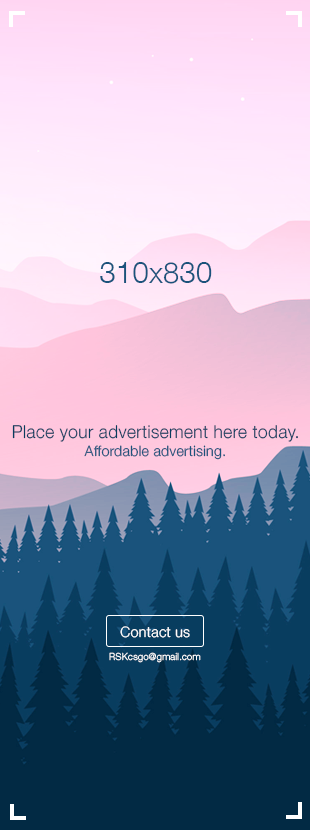
<style>
.page{position:relative;width:310px;height:830px}
.page>*{position:absolute;margin:0}
.t1{font:29px "HelveticaNeue-Light";letter-spacing:0.01em;color:#1a537c}
.t2{font:17.7px "HelveticaNeue-Light";letter-spacing:0.01em;color:#083d5f}
.t3{font:14.5px "HelveticaNeue-Light";letter-spacing:0.01em;color:#1a537c}
.t4{font:14.5px "HelveticaNeue-Light";letter-spacing:0.01em;color:#ffffff}
.t5{font:9.7px "HelveticaNeue-Light";letter-spacing:0.01em;color:#ffffff}
</style>
<div class="page">
<p class="t1" style="left:100px;top:262px;width:112px;height:22px">310x830</p>
<p class="t2" style="left:12px;top:425px;width:286px;height:17px">Place your advertisement here today.</p>
<p class="t3" style="left:84px;top:445px;width:141px;height:15px">Affordable advertising.</p>
<p class="t4" style="left:120px;top:626px;width:70px;height:12px">Contact us</p>
<p class="t5" style="left:109px;top:652px;width:92px;height:11px">RSKcsgo@gmail.com</p>
</div>
